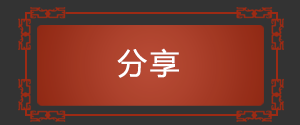
<style>
.page{position:relative;width:300px;height:125px;background:#333333}
.page>*{position:absolute;margin:0}
.t1{font:29.4px "MicrosoftYaHei";letter-spacing:0.1em;color:#ffffff}
</style>
<div class="page">
<p class="t1" style="left:117px;top:48px;width:62px;height:30px">分享</p>
</div>
